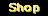
<style>
.page{position:relative;width:48px;height:16px;background:#000000}
.page>*{position:absolute;margin:0}
.t1{font:11px "Meiryo";color:#f0f080;font-weight:bold}
</style>
<div class="page">
<p class="t1" style="left:9px;top:3px;width:30px;height:10px">Shop</p>
</div>
